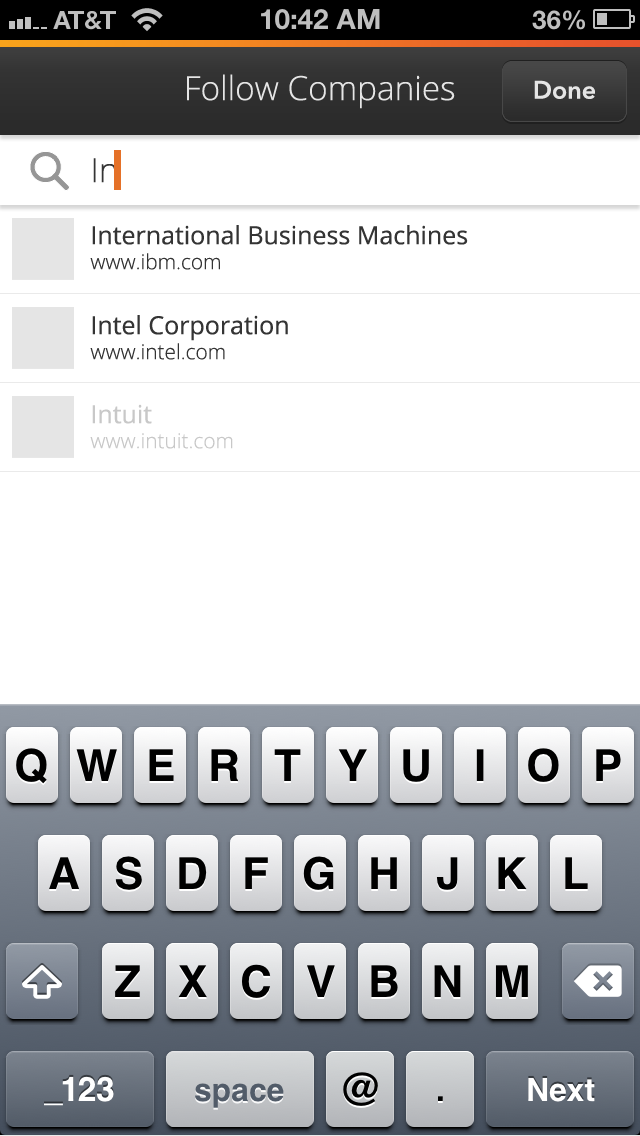
<style>
.page{position:relative;width:640px;height:1136px;background:#ffffff}
.page>*{position:absolute;margin:0}
.t1{font:33.3px "OpenSans-Light";color:#e5e5e5}
.t2{font:25px "AvenirNext-DemiBold";color:#e5e5e5}
.t3{font:33.3px "OpenSans-Light";color:#343434}
.t4{font:25px "OpenSans";color:#343434}
.t5{font:20.8px "OpenSans-Light";color:#343434}
.t6{font:20.8px "OpenSans-Light";color:#c8c8c8}
.t7{font:25px "OpenSans";color:#c8c8c8}
</style>
<div class="page">
<p class="t1" style="left:187px;top:74px;width:268px;height:35px">Follow Companies</p>
<p class="t2" style="left:534px;top:80px;width:61px;height:19px">Done</p>
<p class="t3" style="left:93px;top:158px;width:23px;height:25px">In</p>
<p class="t4" style="left:90px;top:225px;width:378px;height:45px">International Business Machines<br><span class="t5">www.ibm.com</span></p>
<p class="t4" style="left:90px;top:315px;width:198px;height:45px">Intel Corporation<br><span class="t5">www.intel.com</span></p>
<p class="t6" style="left:90px;top:404px;width:143px;height:45px"><span class="t7">Intuit<br></span>www.intuit.com</p>
</div>
